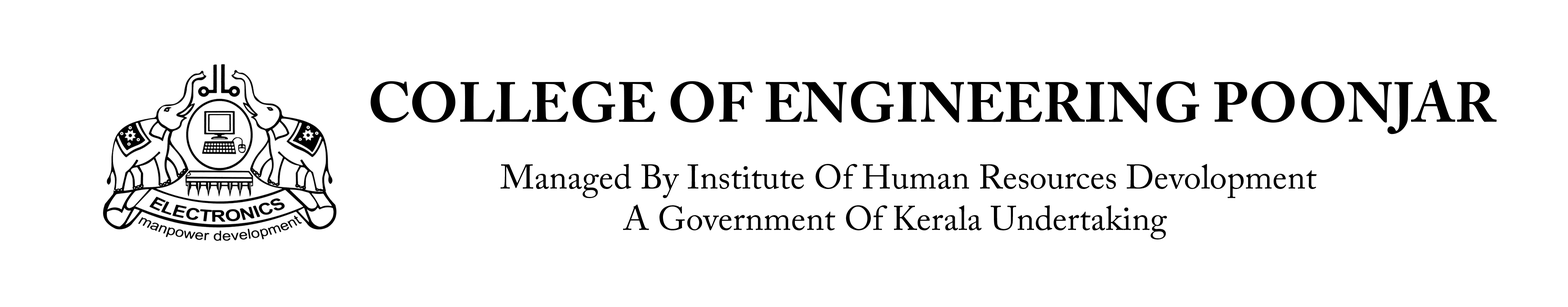
<style>
.page{position:relative;width:1568px;height:307px;background:#ffffff}
.page>*{position:absolute;margin:0}
.t1{font:56.6px "ACaslonPro-Bold";color:#000000}
.t2{font:34.6px "ACaslonPro-Regular";color:#000000}
</style>
<div class="page">
<p class="t1" style="left:370px;top:80px;width:1127px;height:54px">COLLEGE OF ENGINEERING POONJAR</p>
<p class="t2" style="left:500px;top:164px;width:817px;height:76px">Managed By Institute Of Human Resources Devolopment<br>              A Government Of Kerala Undertaking</p>
</div>
